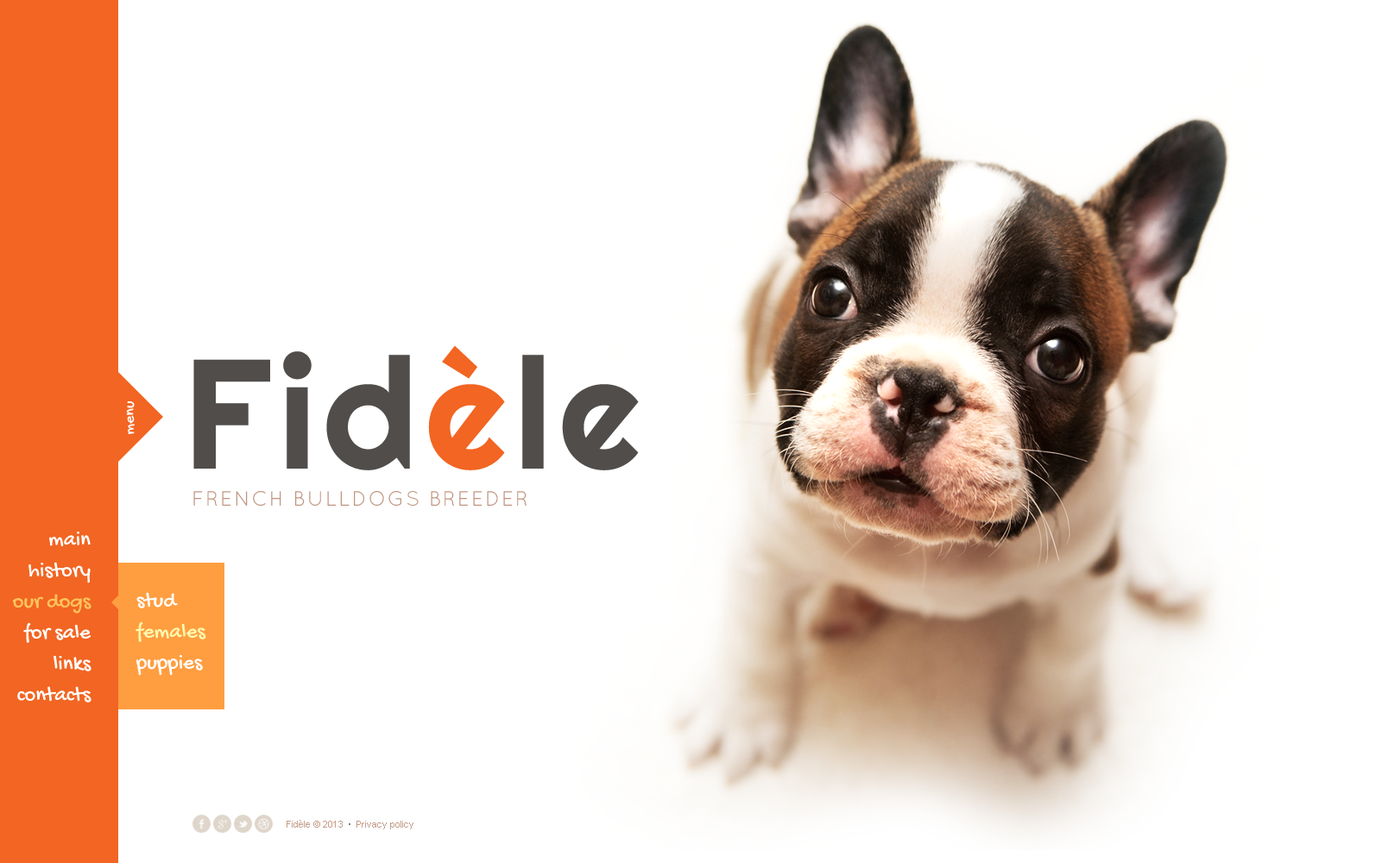
<style>
.page{position:relative;width:1381px;height:863px;background:#ffffff}
.page>*{position:absolute;margin:0}
.t1{font:155.4px "Righteous-Regular";letter-spacing:0.05em;color:#504d4a}
.t2{font:155.4px "Righteous-Regular";letter-spacing:0.05em;color:#f26522}
.t3{font:15.5px "GochiHand-Regular";color:#ffffff}
.t4{font:20.7px "Quicksand-Regular";letter-spacing:0.075em;color:#bf947f;text-transform:uppercase}
.t5{font:21.6px/31.1px "GochiHand-Regular";color:#ffffff}
.t6{font:21.6px/31.1px "GochiHand-Regular";color:#ffc45d}
.t7{font:21.6px/31.1px "GochiHand-Regular";color:#fef9b0}
.t8{font:9.5px "ArialMT";color:#bf947f}
</style>
<div class="page">
<p class="t1" style="left:193px;top:345px;width:446px;height:125px">Fid<span class="t2">è</span>le</p>
<p class="t3" style="left:126px;top:401px;width:9px;height:33px;rotate:-90deg">menu</p>
<p class="t4" style="left:193px;top:491px;width:334px;height:15px">French Bulldogs Breeder</p>
<p class="t5" style="left:12px;top:532px;width:80px;height:171px;text-align:right">main<br>history<br><span class="t6">our dogs<br></span>for sale<br>links<br>contacts</p>
<p class="t7" style="left:136px;top:592px;width:70px;height:84px"><span class="t5">stud<br></span>females<br><span class="t5">puppies</span></p>
<p class="t8" style="left:287px;top:820px;width:127px;height:10px;opacity:0.92">Fidèle © 2013     Privacy policy</p>
</div>
